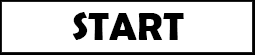
<style>
.page{position:relative;width:255px;height:55px;background:#ffffff}
.page>*{position:absolute;margin:0}
.t1{font:40px "BerlinSansFBDemi-Bold";color:#000000}
</style>
<div class="page">
<p class="t1" style="left:72px;top:12px;width:112px;height:28px">START</p>
</div>
